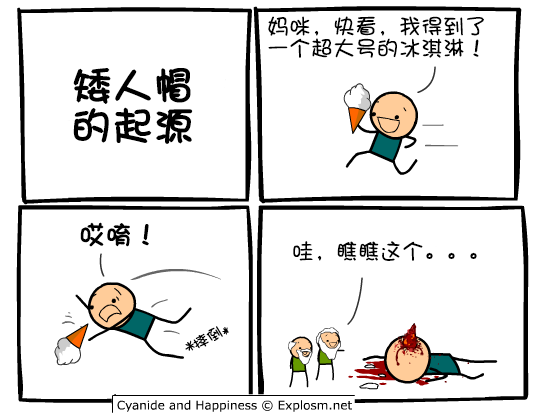
<style>
.page{position:relative;width:540px;height:420px;background:#ffffff}
.page>*{position:absolute;margin:0}
.t1{font:22px/22px "DFShaoNvW5";color:#000000}
.t2{font:40px/40px "DFShaoNvW5";color:#000000;font-weight:bold}
.t3{font:26px "DFShaoNvW5";color:#000000;font-weight:bold}
.t4{font:22px "DFShaoNvW5";color:#000000}
.t5{font:15px "DFShaoNvW5";color:#000000;scale:1.04 1}
</style>
<div class="page">
<p class="t1" style="left:268px;top:16px;width:216px;height:42px">妈咪，快看，我得到了<br>一个超大号的冰淇淋！</p>
<p class="t2" style="left:73px;top:68px;width:120px;height:76px">矮人帽<br>的起源</p>
<p class="t3" style="left:80px;top:222px;width:69px;height:25px">哎唷！</p>
<p class="t4" style="left:293px;top:241px;width:184px;height:20px">哇，瞧瞧这个。。。</p>
<p class="t5" style="left:193px;top:326px;width:30px;height:23px;rotate:-29deg">摔倒</p>
</div>
